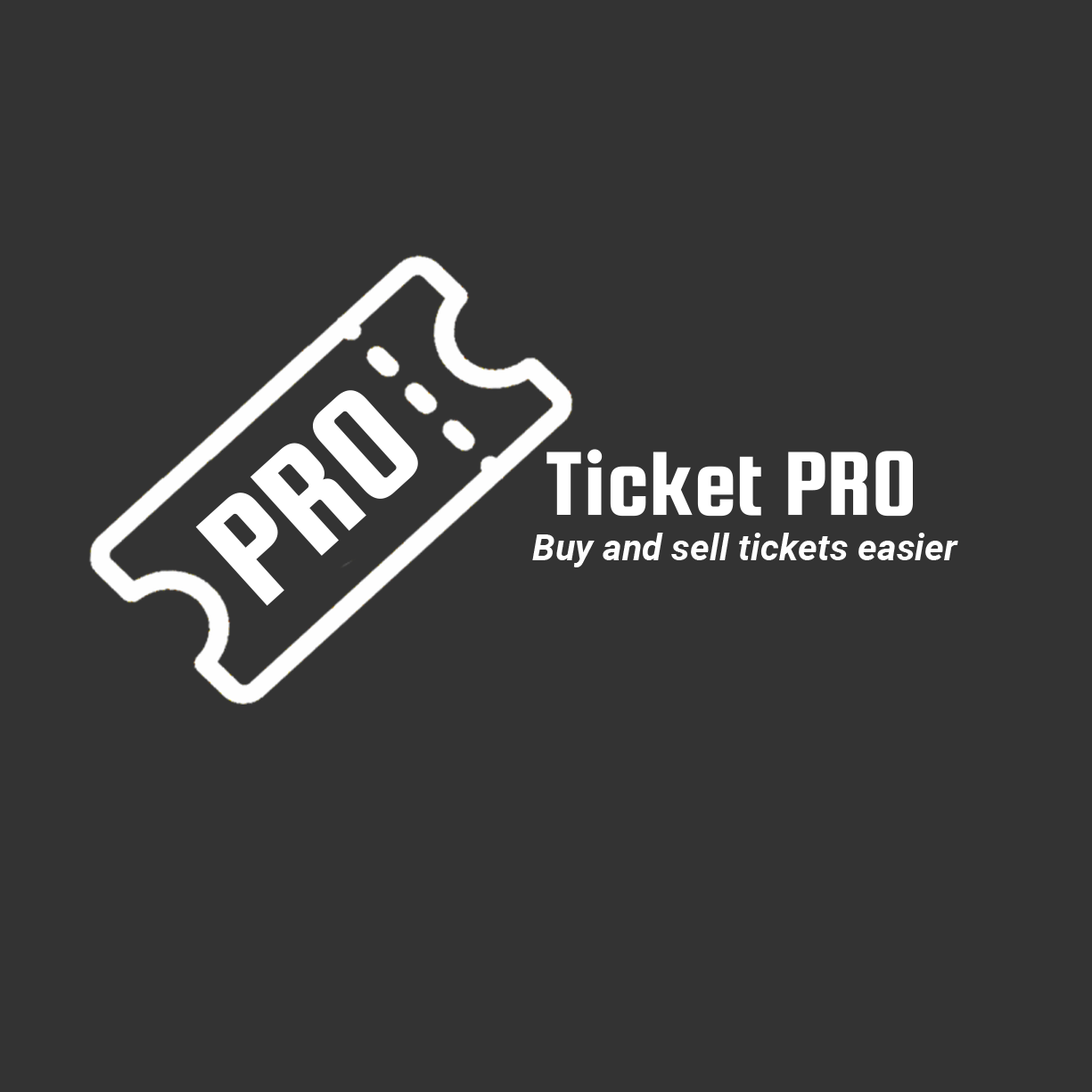
<style>
.page{position:relative;width:1092px;height:1092px;background:#333333}
.page>*{position:absolute;margin:0}
.t1{font:164px "SquadaOne-Regular";color:#ffffff}
.t2{font:97px "SquadaOne-Regular";color:#ffffff}
.t3{font:37px "Roboto-BoldItalic";color:#ffffff}
</style>
<div class="page">
<p class="t1" style="left:195px;top:390px;width:223px;height:216px;rotate:-42deg">PRO</p>
<p class="t2" style="left:546px;top:449px;width:366px;height:68px">Ticket PRO</p>
<p class="t3" style="left:532px;top:533px;width:426px;height:35px">Buy and sell tickets easier</p>
</div>
